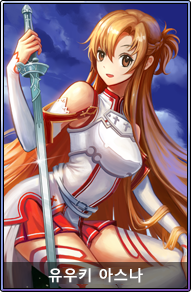
<style>
.page{position:relative;width:191px;height:292px}
.page>*{position:absolute;margin:0}
.t1{font:15px "MalgunGothicBold";color:#ffffff}
</style>
<div class="page">
<p class="t1" style="left:48px;top:268px;width:95px;height:15px">유우키 아스나</p>
</div>
